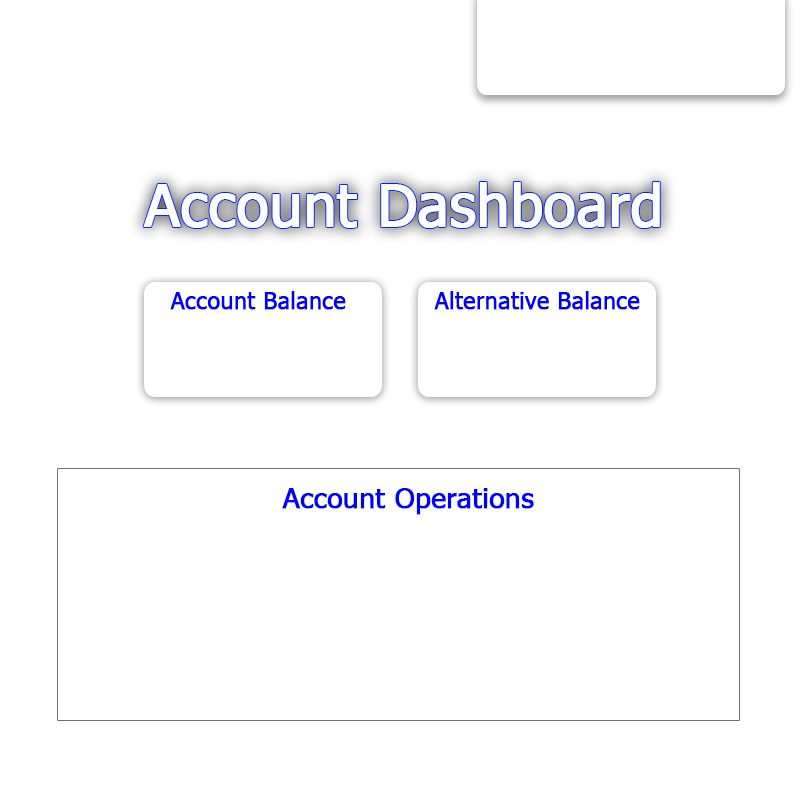
<style>
.page{position:relative;width:800px;height:800px;background:#ffffff}
.page>*{position:absolute;margin:0}
.t1{font:57.7px "Tahoma";color:#ffffff;font-weight:bold}
.t2{font:22.6px "Tahoma";color:#0000ff;font-weight:bold}
.t3{font:28.1px "Tahoma";color:#0000ff;font-weight:bold}
</style>
<div class="page">
<p class="t1" style="left:143px;top:182px;width:517px;height:46px">Account Dashboard</p>
<p class="t2" style="left:170px;top:291px;width:176px;height:19px">Account Balance</p>
<p class="t2" style="left:434px;top:291px;width:206px;height:19px">Alternative Balance</p>
<p class="t3" style="left:282px;top:488px;width:252px;height:27px">Account Operations</p>
</div>
